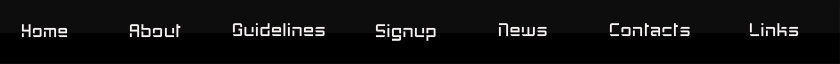
<style>
.page{position:relative;width:840px;height:64px;background:#0d0d0d}
.page>*{position:absolute;margin:0}
.t1{font:29px "GrayCat";color:#f8f4f4;scale:0.95 1}
.t2{font:29px "GrayCat";color:#f8f4f4}
</style>
<div class="page">
<p class="t1" style="left:21px;top:24px;width:47px;height:14px">Home</p>
<p class="t2" style="left:129px;top:24px;width:52px;height:14px">About</p>
<p class="t2" style="left:232px;top:23px;width:93px;height:14px">Guidelines</p>
<p class="t2" style="left:375px;top:24px;width:61px;height:17px">Signup</p>
<p class="t2" style="left:498px;top:23px;width:49px;height:14px">News</p>
<p class="t2" style="left:609px;top:23px;width:81px;height:14px">Contacts</p>
<p class="t2" style="left:749px;top:23px;width:50px;height:14px">Links</p>
</div>
